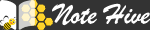
<style>
.page{position:relative;width:150px;height:30px;background:#333333}
.page>*{position:absolute;margin:0}
.t1{font:30px "BrushScriptMT";color:#ffffff}
</style>
<div class="page">
<p class="t1" style="left:52px;top:3px;width:98px;height:23px">Note Hive</p>
</div>
